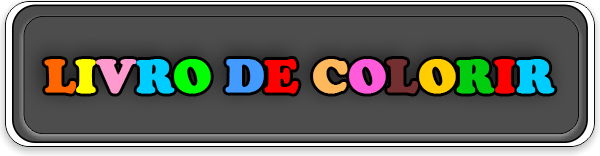
<style>
.page{position:relative;width:600px;height:156px;background:#4d4d4d}
.page>*{position:absolute;margin:0}
.t1{font:47.8px "CooperBlack";color:#ff6600;font-weight:bold}
.t2{font:47.8px "CooperBlack";color:#ffff00;font-weight:bold}
.t3{font:47.8px "CooperBlack";color:#ff9acf;font-weight:bold}
.t4{font:47.8px "CooperBlack";color:#00cdff;font-weight:bold}
.t5{font:47.8px "CooperBlack";color:#00ff00;font-weight:bold}
.t6{font:47.8px "CooperBlack";color:#439aff;font-weight:bold}
.t7{font:47.8px "CooperBlack";color:#ff0000;font-weight:bold}
.t8{font:47.8px "CooperBlack";color:#ffb85b;font-weight:bold}
.t9{font:47.8px "CooperBlack";color:#ff5bdb;font-weight:bold}
.t10{font:47.8px "CooperBlack";color:#743030;font-weight:bold}
.t11{font:47.8px "CooperBlack";color:#ffcd00;font-weight:bold}
.t12{font:47.8px "CooperBlack";color:#00cd0d;font-weight:bold}
</style>
<div class="page">
<p class="t1" style="left:44px;top:59px;width:511px;height:35px">L<span class="t2">I</span><span class="t3">V</span><span class="t4">R</span><span class="t5">O </span><span class="t6">D</span><span class="t7">E </span><span class="t8">C</span><span class="t9">O</span><span class="t10">L</span><span class="t11">O</span><span class="t12">R</span><span class="t7">I</span><span class="t4">R</span></p>
</div>
